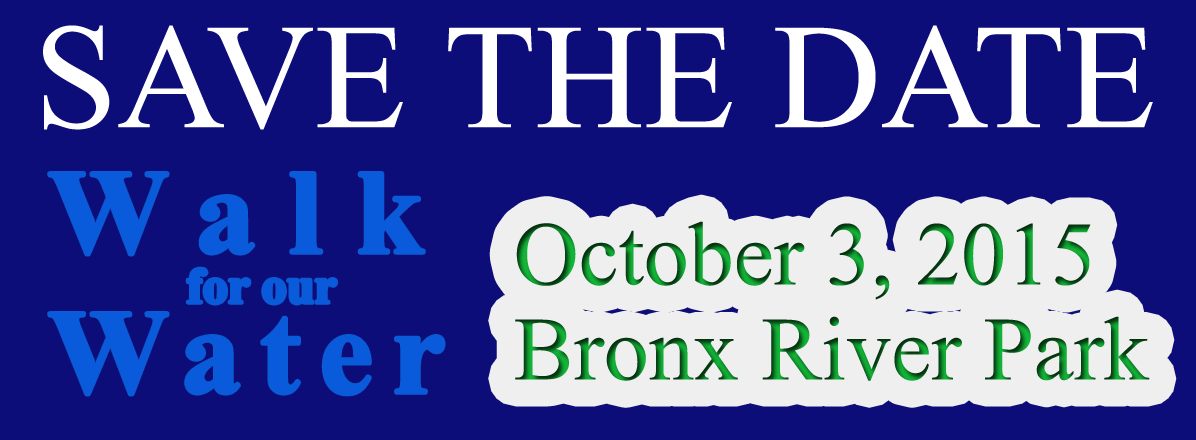
<style>
.page{position:relative;width:1196px;height:440px;background:#0d0d7a}
.page>*{position:absolute;margin:0}
.t1{font:150px "TimesNewRomanPSMT";color:#ffffff}
.t2{font:50px/50px "TimesNewRomanPS-BoldMT";color:#0a5bdb}
.t3{font:120px "TimesNewRomanPS-BoldMT";letter-spacing:0.28em;color:#0a5bdb}
.t4{font:120px/90px "TimesNewRomanPS-BoldMT";letter-spacing:0.16em;color:#0a5bdb}
.t5{font:90px/95px "TimesNewRomanPSMT"}
</style>
<div class="page">
<p class="t1" style="left:43px;top:25px;width:1110px;height:105px">SAVE THE DATE</p>
<p class="t2" style="left:49px;top:173px;width:395px;height:222px"><span class="t3">Walk<br></span>for our <br><span class="t4">Water</span></p>
<p class="t5" style="left:515px;top:221px;width:635px;height:160px">October 3, 2015<br>Bronx River Park</p>
</div>
